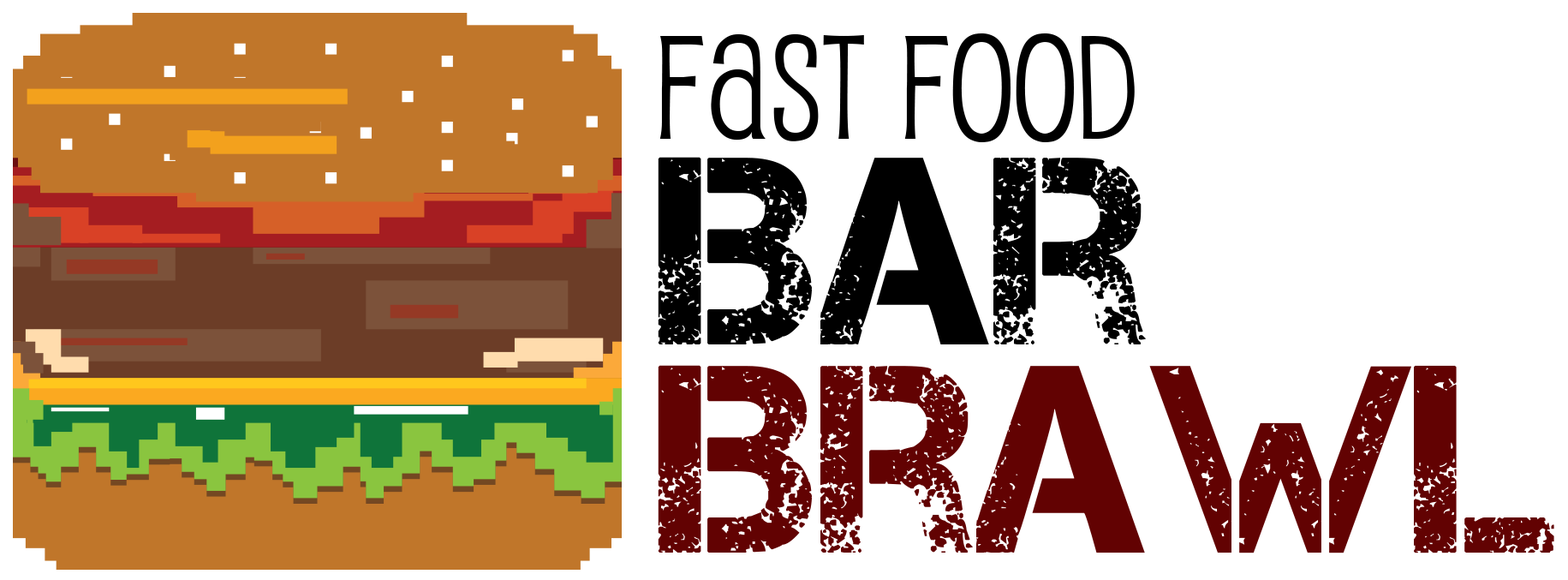
<style>
.page{position:relative;width:1568px;height:580px;background:#ffffff}
.page>*{position:absolute;margin:0}
.t1{font:143.2px "Pupcat";color:#000000}
.t2{font:266.3px "Captureit";color:#000000}
.t3{font:266.3px "Captureit";color:#620202}
</style>
<div class="page">
<p class="t1" style="left:659px;top:33px;width:476px;height:109px">Fast Food</p>
<p class="t2" style="left:658px;top:157px;width:488px;height:187px">Bar</p>
<p class="t3" style="left:658px;top:365px;width:896px;height:188px">Brawl</p>
</div>
